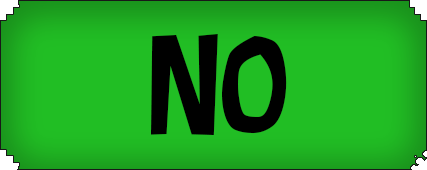
<style>
.page{position:relative;width:427px;height:170px;background:#21be24}
.page>*{position:absolute;margin:0}
.t1{font:183.3px "CartonsixNC";color:#000000}
</style>
<div class="page">
<p class="t1" style="left:151px;top:34px;width:136px;height:101px">No</p>
</div>
